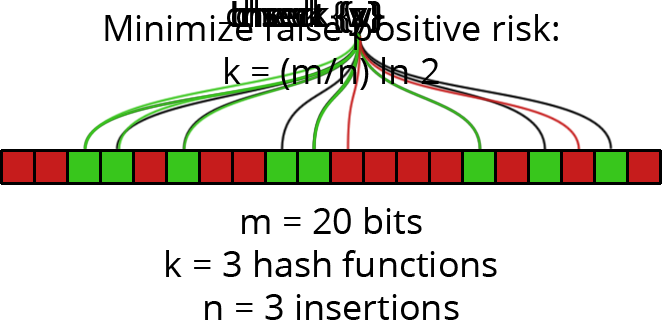
<style>
.page{position:relative;width:662px;height:320px;background:#ffffff}
.page>*{position:absolute;margin:0}
.t1{font:36px "OpenSans";color:#000000}
</style>
<div class="page">
<p class="t1" style="left:227px;top:0px;width:158px;height:33px">check {w}</p>
<p class="t1" style="left:232px;top:1px;width:149px;height:32px">Insert {x}</p>
<p class="t1" style="left:232px;top:1px;width:148px;height:35px">Insert {y}</p>
<p class="t1" style="left:232px;top:0px;width:148px;height:33px">check {v}</p>
<p class="t1" style="left:233px;top:1px;width:147px;height:32px">Insert {z}</p>
<p class="t1" style="left:237px;top:0px;width:147px;height:36px">check {y}</p>
<p class="t1" style="left:105px;top:14px;width:453px;height:76px;text-align:center">Minimize false positive risk:<br>k = (m/n) ln 2</p>
<p class="t1" style="left:166px;top:207px;width:331px;height:113px;text-align:center">m = 20 bits<br>k = 3 hash functions<br>n = 3 insertions</p>
</div>
